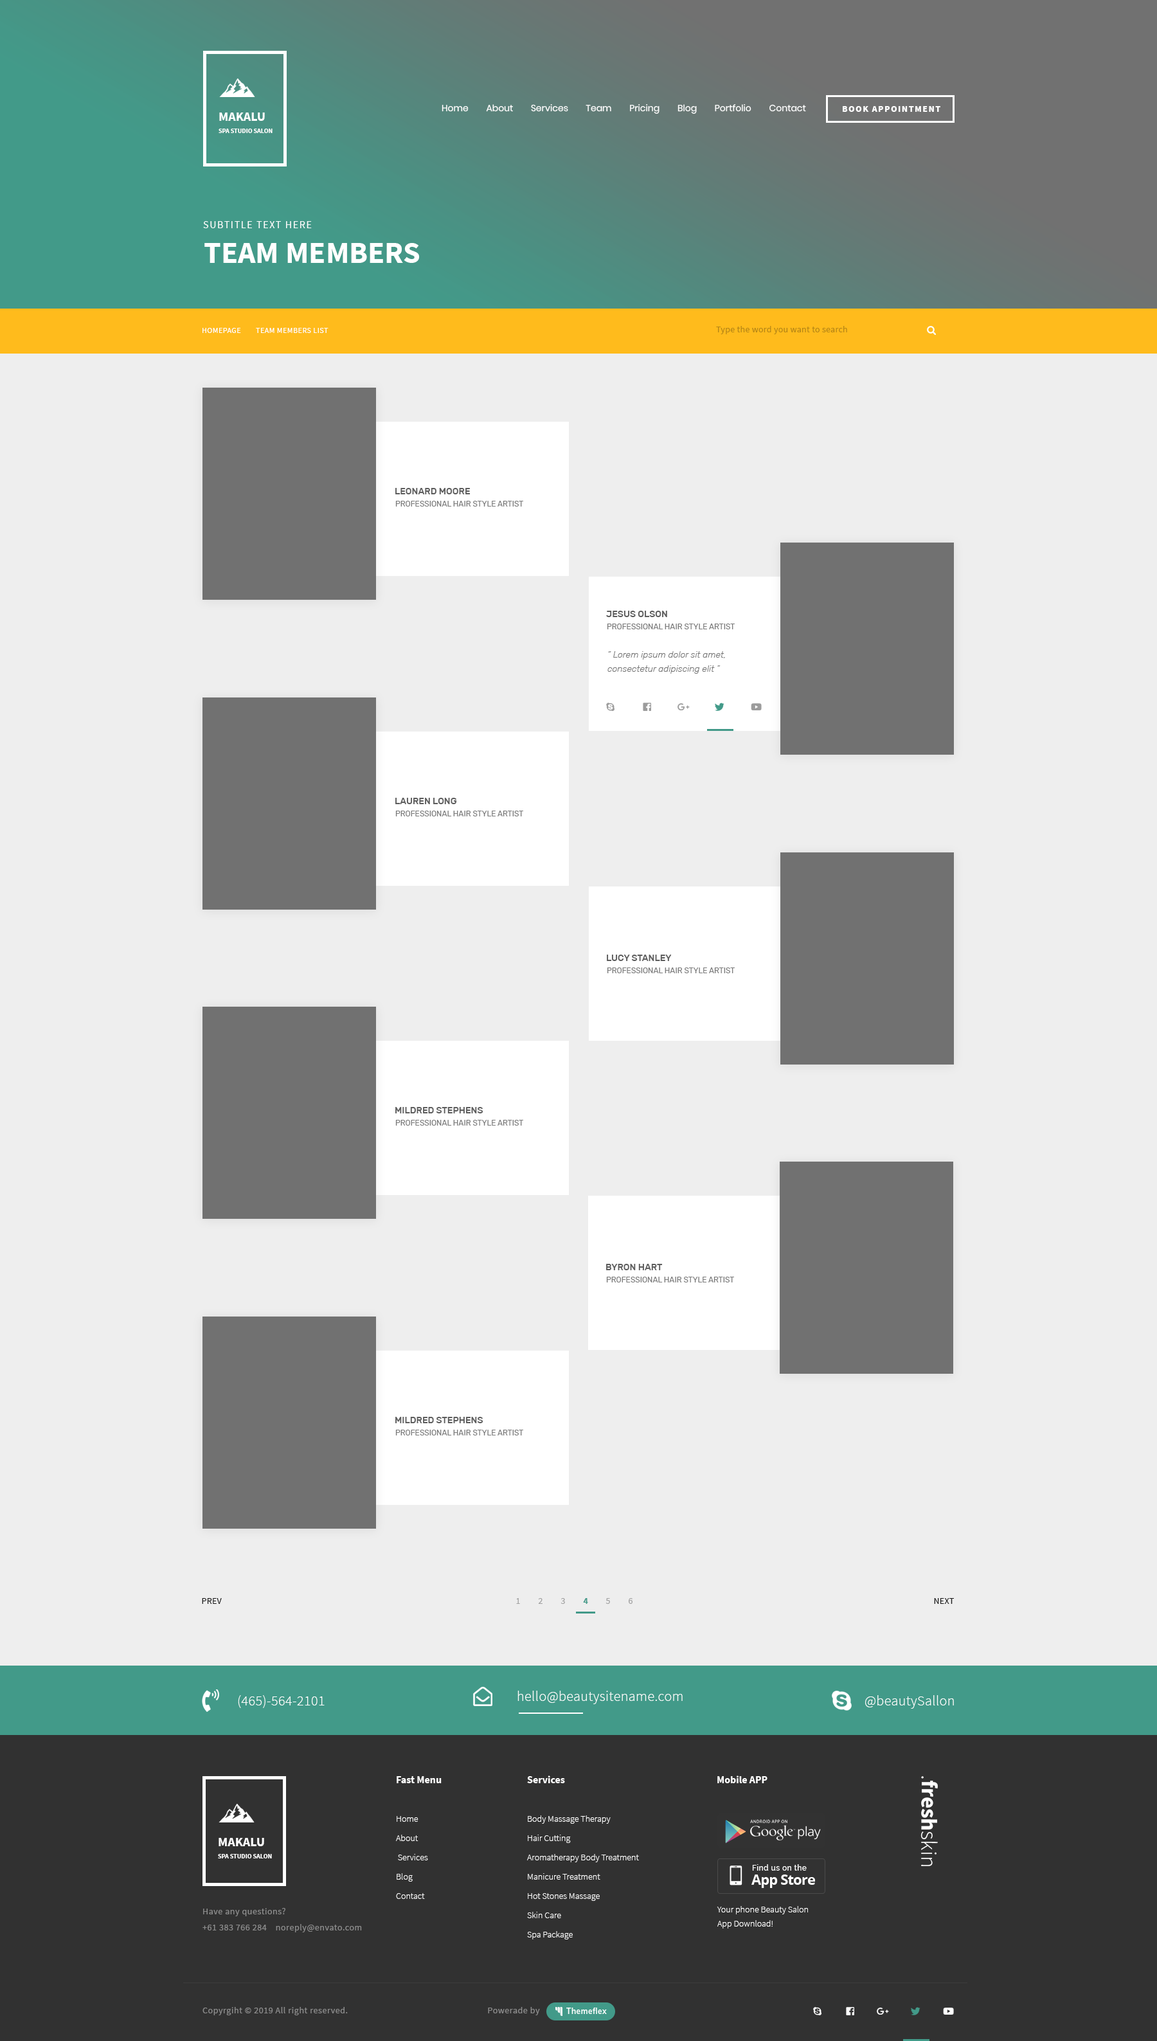
<style>
.page{position:relative;width:1157px;height:2041px;background:#eeeeee}
.page>*{position:absolute;margin:0}
.t1{font:12.9px "SourceSansPro-Bold";color:#ffffff;text-transform:uppercase}
.t2{font:9px "Poppins-Regular";color:#ffffff}
.t3{font:9px "SourceSansPro-Black";letter-spacing:0.1em;color:#ffffff}
.t4{font:6.4px "SourceSansPro-Bold";color:#ffffff;text-transform:uppercase}
.t5{font:10.3px "SourceSansPro-Regular";letter-spacing:0.1em;color:#ffffff}
.t6{font:30.9px "SourceSansPro-Bold";color:#ffffff}
.t7{font:7.7px "SourceSansPro-Regular";letter-spacing:0.04em;color:#ffffff}
.t8{font:9px "SourceSansPro-Regular";letter-spacing:0.02em;color:#b68616}
.t9{font:9px "Rubik-Medium";color:#5d5d5d;text-transform:uppercase}
.t10{font:7.7px "Rubik-Regular";color:#7b7b7b;text-transform:uppercase}
.t11{font:9px/14.1px "Rubik-LightItalic";color:#747474}
.t12{font:9px "SourceSansPro-Regular";letter-spacing:0.02em;color:#1a1a1a}
.t13{font:9px "SourceSansPro-Regular";letter-spacing:0.02em;color:#a1a1a1}
.t14{font:9px "SourceSansPro-Bold";letter-spacing:0.02em;color:#429a89}
.t15{font:14.1px "SourceSansPro-Light";letter-spacing:0.02em;color:#ffffff}
.t16{font:9px/19.3px "SourceSansPro-Light";color:#ffffff}
.t17{font:10.3px/19.3px "SourceSansPro-Bold";color:#ffffff}
.t18{font:10.3px "SourceSansPro-Bold";color:#ffffff}
.t19{font:22.5px "SourceSansPro-Bold";color:#ffffff}
.t20{font:22.5px "SourceSansPro-Light";color:#ffffff}
.t21{font:9px/16.1px "SourceSansPro-Regular";letter-spacing:0.04em;color:#8c8c8c}
.t22{font:9px/14.1px "SourceSansPro-Light";color:#ffffff}
.t23{font:9px "SourceSansPro-Regular";letter-spacing:0.04em;color:#8c8c8c}
</style>
<div class="page">
<p class="t1" style="left:219px;top:113px;width:46px;height:8px">MAKALU</p>
<p class="t2" style="left:442px;top:104px;width:364px;height:10px">Home        About        Services        Team        Pricing        Blog        Portfolio        Contact</p>
<p class="t3" style="left:843px;top:106px;width:98px;height:6px">BOOK APPOINTMENT</p>
<p class="t4" style="left:219px;top:129px;width:54px;height:4px">spa studıo salon</p>
<p class="t5" style="left:203px;top:221px;width:109px;height:7px">SUBTITLE TEXT HERE</p>
<p class="t6" style="left:204px;top:243px;width:216px;height:20px">TEAM MEMBERS</p>
<p class="t7" style="left:203px;top:328px;width:125px;height:5px">HOMEPAGE        TEAM MEMBERS LIST</p>
<p class="t8" style="left:716px;top:326px;width:131px;height:8px">Type the word you want to search</p>
<p class="t9" style="left:395px;top:488px;width:76px;height:6px">Leonard Moore</p>
<p class="t10" style="left:395px;top:501px;width:128px;height:6px">PROFESSIONAL HAIR STYLE ARTIST</p>
<p class="t9" style="left:606px;top:611px;width:61px;height:6px">Jesus Olson</p>
<p class="t10" style="left:607px;top:624px;width:128px;height:5px">PROFESSIONAL HAIR STYLE ARTIST</p>
<p class="t11" style="left:608px;top:651px;width:117px;height:23px">“ Lorem ipsum dolor sit amet,<br>consectetur adipiscing elit ”</p>
<p class="t9" style="left:395px;top:798px;width:62px;height:6px">Lauren Long</p>
<p class="t10" style="left:395px;top:811px;width:128px;height:5px">PROFESSIONAL HAIR STYLE ARTIST</p>
<p class="t9" style="left:607px;top:955px;width:65px;height:6px">Lucy Stanley</p>
<p class="t10" style="left:607px;top:968px;width:128px;height:5px">PROFESSIONAL HAIR STYLE ARTIST</p>
<p class="t9" style="left:395px;top:1107px;width:88px;height:6px">Mildred Stephens</p>
<p class="t10" style="left:395px;top:1120px;width:128px;height:6px">PROFESSIONAL HAIR STYLE ARTIST</p>
<p class="t9" style="left:606px;top:1264px;width:57px;height:6px">Byron Hart</p>
<p class="t10" style="left:606px;top:1277px;width:128px;height:5px">PROFESSIONAL HAIR STYLE ARTIST</p>
<p class="t9" style="left:395px;top:1417px;width:88px;height:6px">Mildred Stephens</p>
<p class="t10" style="left:395px;top:1430px;width:128px;height:6px">PROFESSIONAL HAIR STYLE ARTIST</p>
<p class="t12" style="left:202px;top:1598px;width:20px;height:6px">PREV</p>
<p class="t13" style="left:516px;top:1598px;width:4px;height:6px">1</p>
<p class="t13" style="left:538px;top:1598px;width:5px;height:6px">2</p>
<p class="t13" style="left:561px;top:1598px;width:4px;height:6px">3</p>
<p class="t14" style="left:583px;top:1598px;width:5px;height:6px">4</p>
<p class="t13" style="left:606px;top:1598px;width:4px;height:6px">5</p>
<p class="t13" style="left:629px;top:1598px;width:4px;height:6px">6</p>
<p class="t12" style="left:934px;top:1598px;width:20px;height:6px">NEXT</p>
<p class="t15" style="left:238px;top:1695px;width:87px;height:13px">(465)-564-2101</p>
<p class="t15" style="left:518px;top:1691px;width:165px;height:13px">hello@beautysitename.com</p>
<p class="t15" style="left:865px;top:1695px;width:89px;height:14px">@beautySallon</p>
<p class="t16" style="left:396px;top:1776px;width:46px;height:123px"><span class="t17">Fast Menu<br><br></span>Home<br>About<br> Services<br>Blog<br>Contact</p>
<p class="t16" style="left:527px;top:1776px;width:112px;height:164px"><span class="t17">Services<br><br></span>Body Massage Therapy<br>Hair Cutting<br>Aromatherapy Body Treatment<br>Manicure Treatment<br>Hot Stones Massage<br>Skin Care<br>Spa Package</p>
<p class="t18" style="left:717px;top:1776px;width:51px;height:7px">Mobile APP</p>
<p class="t19" style="left:921px;top:1776px;width:17px;height:90px;rotate:90deg"><span class="t20">.</span>fresh<span class="t20">skin</span></p>
<p class="t1" style="left:219px;top:1838px;width:45px;height:8px">MAKALU</p>
<p class="t4" style="left:218px;top:1854px;width:54px;height:5px">spa studıo salon</p>
<p class="t21" style="left:203px;top:1908px;width:159px;height:24px">Have any questions? <br>+61 383 766 284    noreply@envato.com</p>
<p class="t22" style="left:717px;top:1906px;width:91px;height:23px">Your phone Beauty Salon<br>App Download!</p>
<p class="t23" style="left:203px;top:2007px;width:145px;height:8px">Copyrgiht © 2019 All right reserved.</p>
<p class="t23" style="left:488px;top:2007px;width:52px;height:8px">Powerade by</p>
</div>
